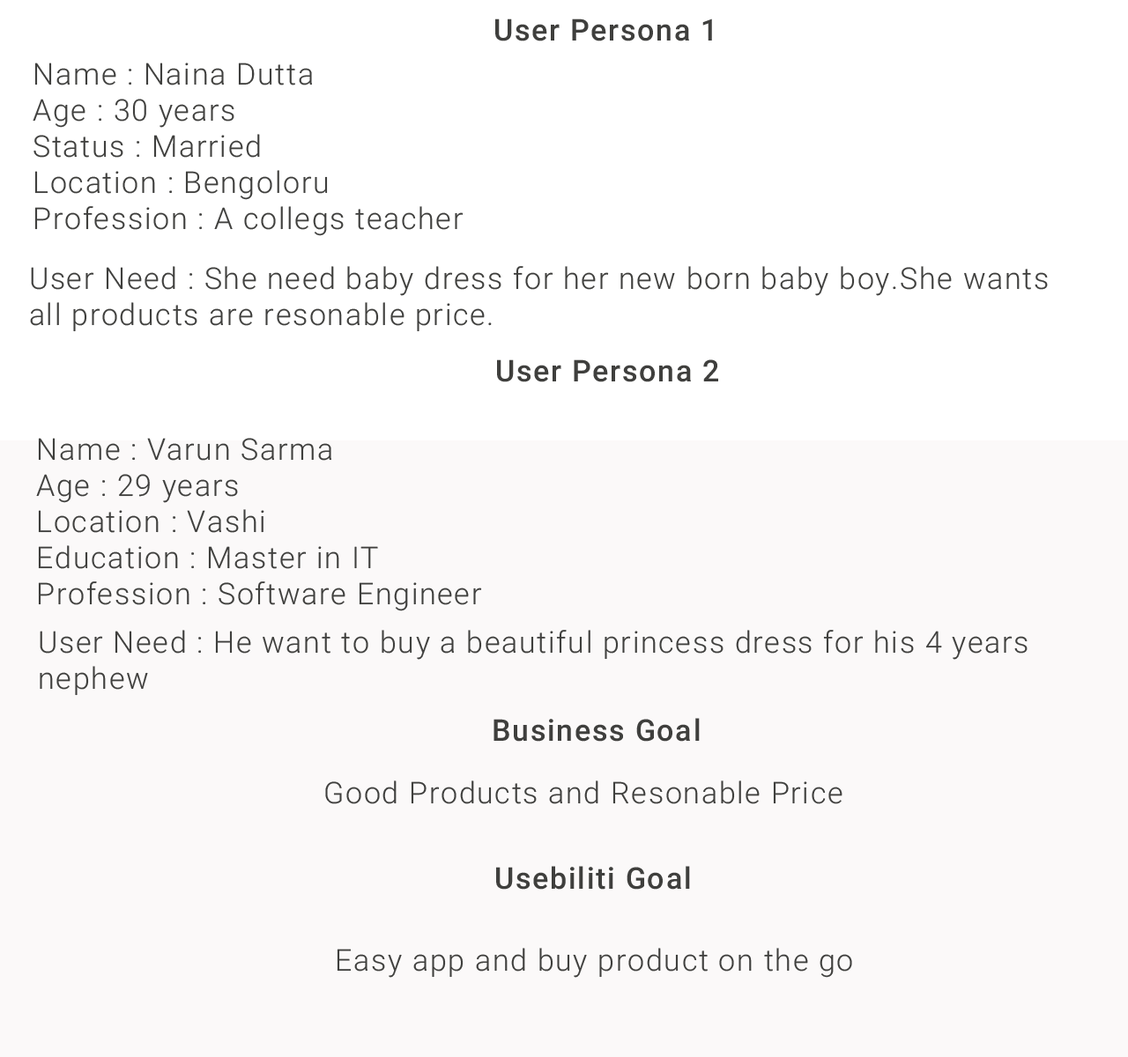
<style>
.page{position:relative;width:1128px;height:1057px;background:#fbf9f9}
.page>*{position:absolute;margin:0}
.t1{font:30px "Roboto-Medium";letter-spacing:0.05em;color:#3f3f3d}
.t2{font:30px/36.1px "Roboto-Light";letter-spacing:0.05em;color:#3f3f3d}
.t3{font:30px "Roboto-Light";letter-spacing:0.05em;color:#3f3f3d}
</style>
<div class="page">
<p class="t1" style="left:495px;top:19px;width:217px;height:22px">User Persona 1</p>
<p class="t2" style="left:33px;top:63px;width:430px;height:173px">Name : Naina Dutta<br>Age : 30 years<br>Status : Married<br>Location : Bengoloru<br>Profession : A collegs teacher</p>
<p class="t2" style="left:30px;top:266px;width:1018px;height:66px">User Need : She need baby dress for her new born baby boy.She wants <br>all products are resonable price.</p>
<p class="t1" style="left:497px;top:359px;width:221px;height:23px">User Persona 2</p>
<p class="t2" style="left:36px;top:438px;width:446px;height:173px">Name : Varun Sarma<br>Age : 29 years<br>Location : Vashi<br>Education : Master in IT<br>Profession : Software Engineer</p>
<p class="t2" style="left:40px;top:630px;width:987px;height:66px">User Need : He want to buy a beautiful princess dress for his 4 years <br>nephew</p>
<p class="t1" style="left:493px;top:718px;width:207px;height:24px">Business Goal</p>
<p class="t3" style="left:325px;top:781px;width:517px;height:23px">Good Products and Resonable Price</p>
<p class="t1" style="left:496px;top:866px;width:194px;height:24px">Usebiliti Goal</p>
<p class="t3" style="left:337px;top:948px;width:515px;height:30px">Easy app and buy product on the go</p>
</div>
